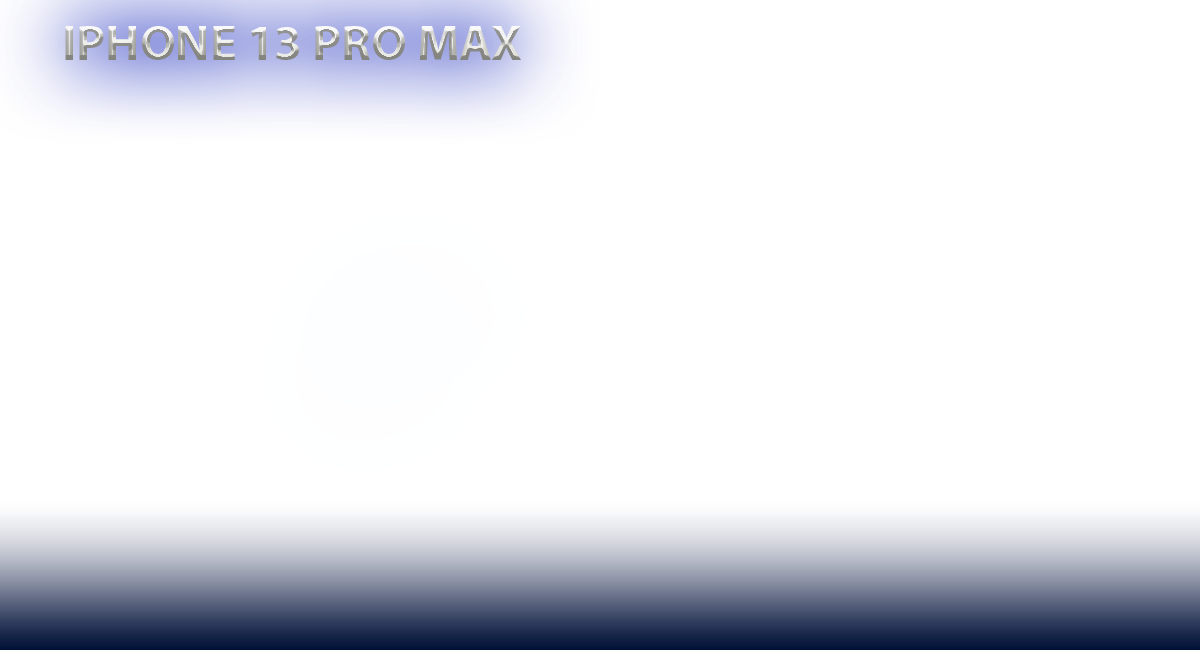
<style>
.page{position:relative;width:1200px;height:650px;background:#ffffff}
.page>*{position:absolute;margin:0}
.t1{font:50px "MyriadPro-Bold"}
</style>
<div class="page">
<p class="t1" style="left:65px;top:26px;width:456px;height:34px">IPHONE 13 PRO MAX</p>
</div>
